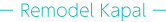
<style>
.page{position:relative;width:166px;height:22px;background:#ffffff}
.page>*{position:absolute;margin:0}
.t1{font:17px "UDShinGoPro-Light";color:#1dbcc0}
</style>
<div class="page">
<p class="t1" style="left:0px;top:2px;width:168px;height:20px">ー Remodel Kapal ー</p>
</div>
